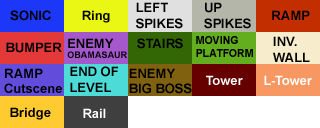
<style>
.page{position:relative;width:320px;height:128px}
.page>*{position:absolute;margin:0}
.t1{font:13px "Arial-BoldMT";color:#000000}
.t2{font:13px "Arial-BoldMT";color:#000001}
.t3{font:9px "Arial-BoldMT";color:#000000}
.t4{font:11px "Arial-BoldMT";color:#000000;scale:0.96 1}
.t5{font:13px "Arial-BoldMT";color:#ffffff}
</style>
<div class="page">
<p class="t1" style="left:136px;top:2px;width:47px;height:27px">LEFT<br>SPIKES</p>
<p class="t1" style="left:204px;top:2px;width:47px;height:27px">UP<br>SPIKES</p>
<p class="t2" style="left:10px;top:10px;width:41px;height:11px">SONIC</p>
<p class="t1" style="left:82px;top:10px;width:28px;height:13px">Ring</p>
<p class="t1" style="left:272px;top:10px;width:38px;height:10px">RAMP</p>
<p class="t3" style="left:67px;top:38px;width:60px;height:20px"><span class="t1">ENEMY<br></span>OBAMASAUR</p>
<p class="t1" style="left:137px;top:38px;width:46px;height:11px">STAIRS</p>
<p class="t4" style="left:196px;top:36px;width:57px;height:21px">MOVING<br>PLATFORM</p>
<p class="t1" style="left:273px;top:36px;width:37px;height:26px">INV.<br>WALL</p>
<p class="t1" style="left:6px;top:42px;width:56px;height:11px">BUMPER</p>
<p class="t1" style="left:4px;top:68px;width:58px;height:25px">RAMP<br>Cutscene</p>
<p class="t1" style="left:70px;top:66px;width:48px;height:26px">END OF<br>LEVEL</p>
<p class="t1" style="left:129px;top:68px;width:63px;height:26px">ENEMY<br>BIG BOSS</p>
<p class="t5" style="left:206px;top:75px;width:37px;height:10px">Tower</p>
<p class="t5" style="left:264px;top:75px;width:48px;height:10px">L-Tower</p>
<p class="t1" style="left:10px;top:107px;width:41px;height:13px">Bridge</p>
<p class="t5" style="left:83px;top:108px;width:23px;height:10px">Rail</p>
</div>
